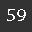
<style>
.page{position:relative;width:32px;height:32px;background:#333333}
.page>*{position:absolute;margin:0}
.t1{font:17.8px "MyriadPro-Regular";color:#ffffff;scale:1.12 1}
</style>
<div class="page">
<p class="t1" style="left:7px;top:9px;width:19px;height:12px">59</p>
</div>
